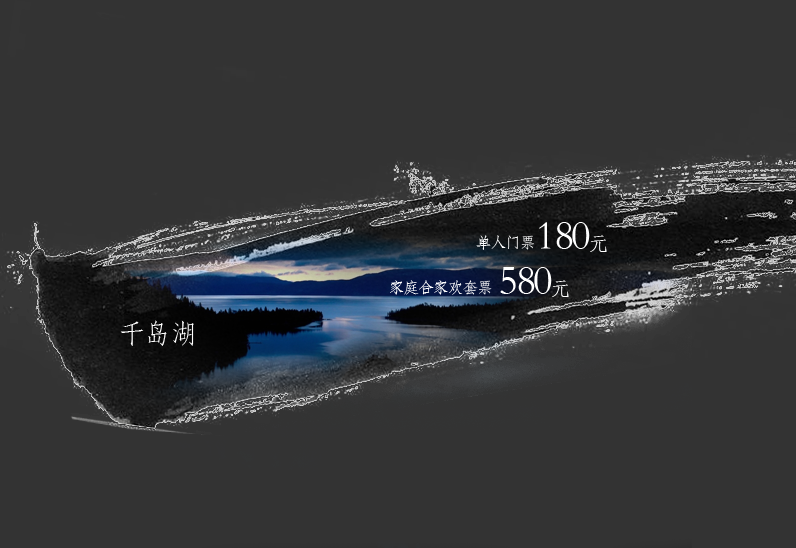
<style>
.page{position:relative;width:796px;height:548px;background:#333333}
.page>*{position:absolute;margin:0}
.t1{font:41.3px "STFangsong";letter-spacing:-0.05em;color:#ffffff}
.t2{font:20.3px "STFangsong";letter-spacing:-0.05em;color:#ffffff}
.t3{font:15.5px "STFangsong";letter-spacing:-0.05em;color:#ffffff}
.t4{font:27.1px "STFangsong";letter-spacing:-0.05em;color:#ffffff}
</style>
<div class="page">
<p class="t1" style="left:539px;top:222px;width:68px;height:30px">180<span class="t2">元</span></p>
<p class="t3" style="left:476px;top:235px;width:58px;height:15px">单人门票</p>
<p class="t1" style="left:500px;top:267px;width:69px;height:30px">580<span class="t2">元</span></p>
<p class="t3" style="left:390px;top:280px;width:102px;height:15px">家庭合家欢套票</p>
<p class="t4" style="left:120px;top:320px;width:74px;height:26px">千岛湖</p>
</div>
